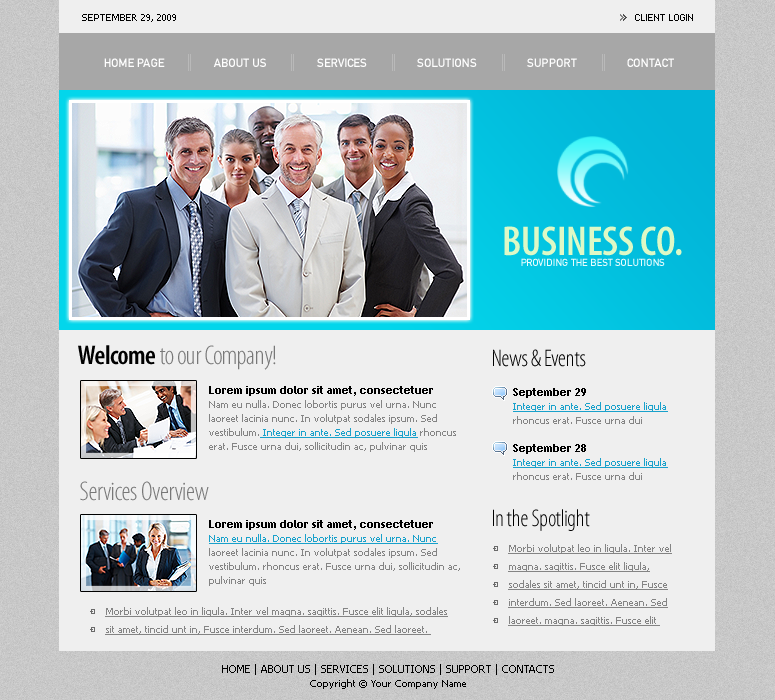
<style>
.page{position:relative;width:775px;height:700px;background:#efefef}
.page>*{position:absolute;margin:0}
.t1{font:10px "Tahoma";color:#000000;text-transform:uppercase}
.t2{font:8px "Standard0755";color:#000000;text-transform:uppercase}
.t3{font:12px "DINMittelschriftStd";color:#ffffff;text-transform:uppercase}
.t4{font:42px "MyriadPro-SemiboldCond";color:#ddf9c6;text-transform:uppercase}
.t5{font:10px "DINMittelschriftStd";color:#e8fdfe;text-transform:uppercase}
.t6{font:27px "MyriadPro-LightCond";letter-spacing:-0.02em;color:#787878}
.t7{font:27px "MyriadPro-SemiboldCond";letter-spacing:-0.02em;color:#000000}
.t8{font:24px "MyriadPro-LightCond";letter-spacing:-0.02em;color:#000000}
.t9{font:10px/14px "Tahoma";color:#848484}
.t10{font:11px/14px "TrebuchetMS-Bold";color:#000000}
.t11{font:10px/14px "Tahoma";color:#19a1cb;text-decoration:underline}
.t12{font:10px/18px "Tahoma";color:#848484;text-decoration:underline}
.t13{font:11px/14px "Tahoma";color:#000000}
.t14{font:10px/14px "Tahoma";color:#000000}
</style>
<div class="page">
<p class="t1" style="left:82px;top:14px;width:94px;height:8px">SEPTEMBER 29, 2009</p>
<p class="t2" style="left:635px;top:14px;width:58px;height:7px">CLIENT LOGIN</p>
<p class="t3" style="left:104px;top:58px;width:61px;height:9px">HOME PAGE</p>
<p class="t3" style="left:213px;top:58px;width:53px;height:9px">ABOUT US</p>
<p class="t3" style="left:317px;top:58px;width:50px;height:9px">SERVICES</p>
<p class="t3" style="left:417px;top:58px;width:60px;height:9px">SOLUTIONS</p>
<p class="t3" style="left:527px;top:58px;width:50px;height:9px">SUPPORT</p>
<p class="t3" style="left:627px;top:58px;width:47px;height:9px">CONTACT</p>
<p class="t4" style="left:504px;top:226px;width:178px;height:30px">BUSINESS co.</p>
<p class="t5" style="left:521px;top:258px;width:144px;height:8px">PROVIDING THE BEST SOLUTIONS</p>
<p class="t6" style="left:78px;top:345px;width:198px;height:25px"><span class="t7">Welcome </span>to our Company!</p>
<p class="t8" style="left:493px;top:349px;width:93px;height:18px">News &amp; Events</p>
<p class="t9" style="left:209px;top:386px;width:247px;height:66px"><span class="t10">Lorem ipsum dolor sit amet, consectetuer <br></span>Nam eu nulla. Donec lobortis purus vel urna. Nunc laoreet lacinia nunc. In volutpat sodales ipsum. Sed vestibulum.<span class="t11"> Integer in ante. Sed posuere ligula</span> rhoncus erat. Fusce urna dui, sollicitudin ac, pulvinar quis</p>
<p class="t11" style="left:513px;top:388px;width:155px;height:92px"><span class="t10">September 29<br></span>Integer in ante. Sed posuere ligula<span class="t9"> rhoncus erat. Fusce urna dui<br><br></span><span class="t10">September 28<br></span>Integer in ante. Sed posuere ligula<span class="t9"> rhoncus erat. Fusce urna dui</span></p>
<p class="t6" style="left:80px;top:481px;width:129px;height:20px">Services Overview</p>
<p class="t8" style="left:493px;top:509px;width:97px;height:22px">In the Spotlight</p>
<p class="t9" style="left:209px;top:520px;width:251px;height:66px"><span class="t10">Lorem ipsum dolor sit amet, consectetuer <br></span><span class="t11">Nam eu nulla. Donec lobortis purus vel urna. Nunc </span>laoreet lacinia nunc. In volutpat sodales ipsum. Sed vestibulum. rhoncus erat. Fusce urna dui, sollicitudin ac, pulvinar quis</p>
<p class="t12" style="left:508px;top:544px;width:164px;height:82px">Morbi volutpat leo in ligula. Inter vel magna. sagittis. Fusce elit ligula, sodales sit amet, tincid unt in, Fusce interdum. Sed laoreet. Aenean. Sed laoreet. magna. sagittis. Fusce elit</p>
<p class="t12" style="left:105px;top:607px;width:343px;height:28px">Morbi volutpat leo in ligula. Inter vel magna. sagittis. Fusce elit ligula, sodales sit amet, tincid unt in, Fusce interdum. Sed laoreet. Aenean. Sed laoreet.</p>
<p class="t13" style="left:222px;top:664px;width:332px;height:25px;text-align:center">HOME | ABOUT US | SERVICES | SOLUTIONS | SUPPORT | CONTACTS<br><span class="t14">Copyright © Your Company Name</span></p>
</div>
